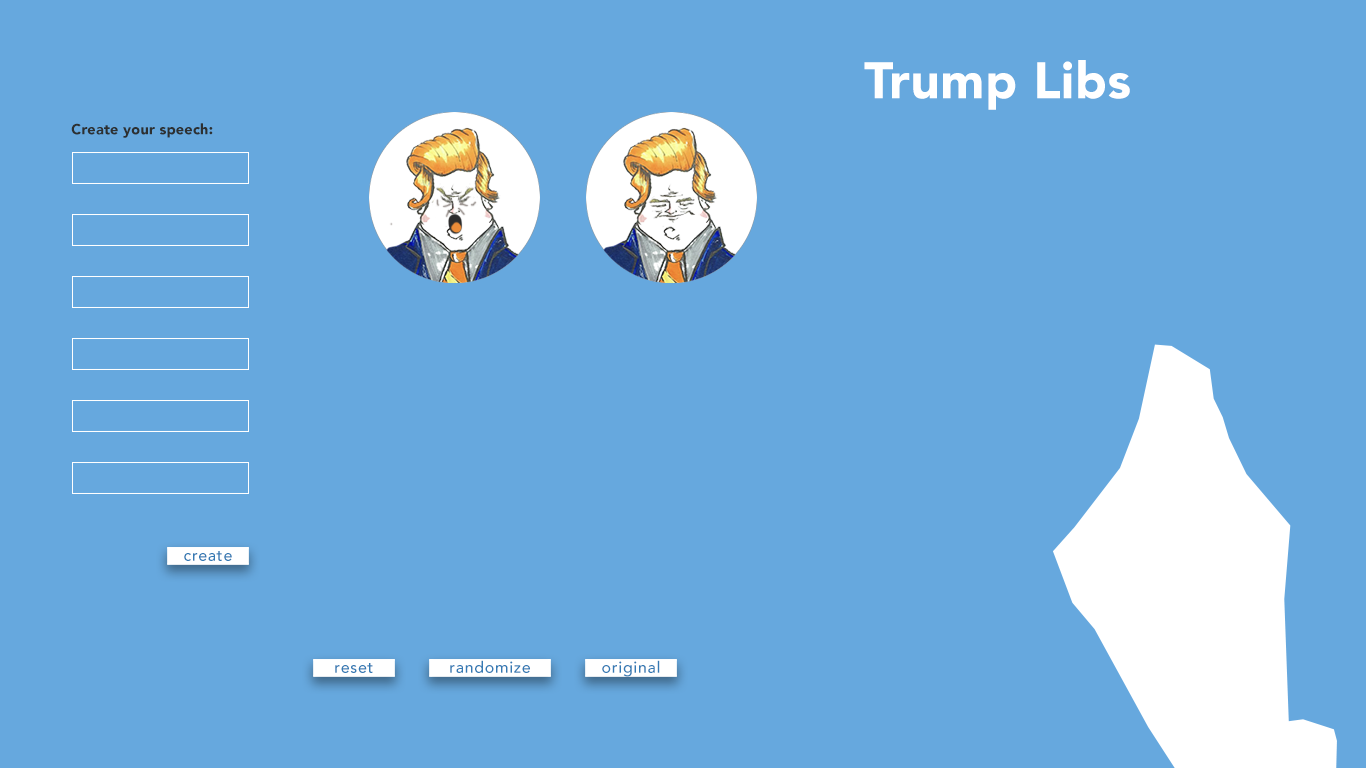
<style>
.page{position:relative;width:1366px;height:768px;background:#66a8de}
.page>*{position:absolute;margin:0}
.t1{font:50.8px "Avenir-Black";letter-spacing:0.011em;color:#ffffff}
.t2{font:14.6px "Avenir-Black";letter-spacing:0.011em;color:#2d3031}
.t3{font:16px "Avenir-Medium";letter-spacing:0.05em;color:#347ab4}
</style>
<div class="page">
<p class="t1" style="left:864px;top:60px;width:266px;height:50px">Trump Libs</p>
<p class="t2" style="left:71px;top:123px;width:142px;height:15px">Create your speech:</p>
<p class="t3" style="left:184px;top:551px;width:48px;height:10px">create</p>
<p class="t3" style="left:335px;top:663px;width:38px;height:10px">reset</p>
<p class="t3" style="left:450px;top:660px;width:80px;height:13px">randomize</p>
<p class="t3" style="left:602px;top:660px;width:58px;height:17px">original</p>
</div>
